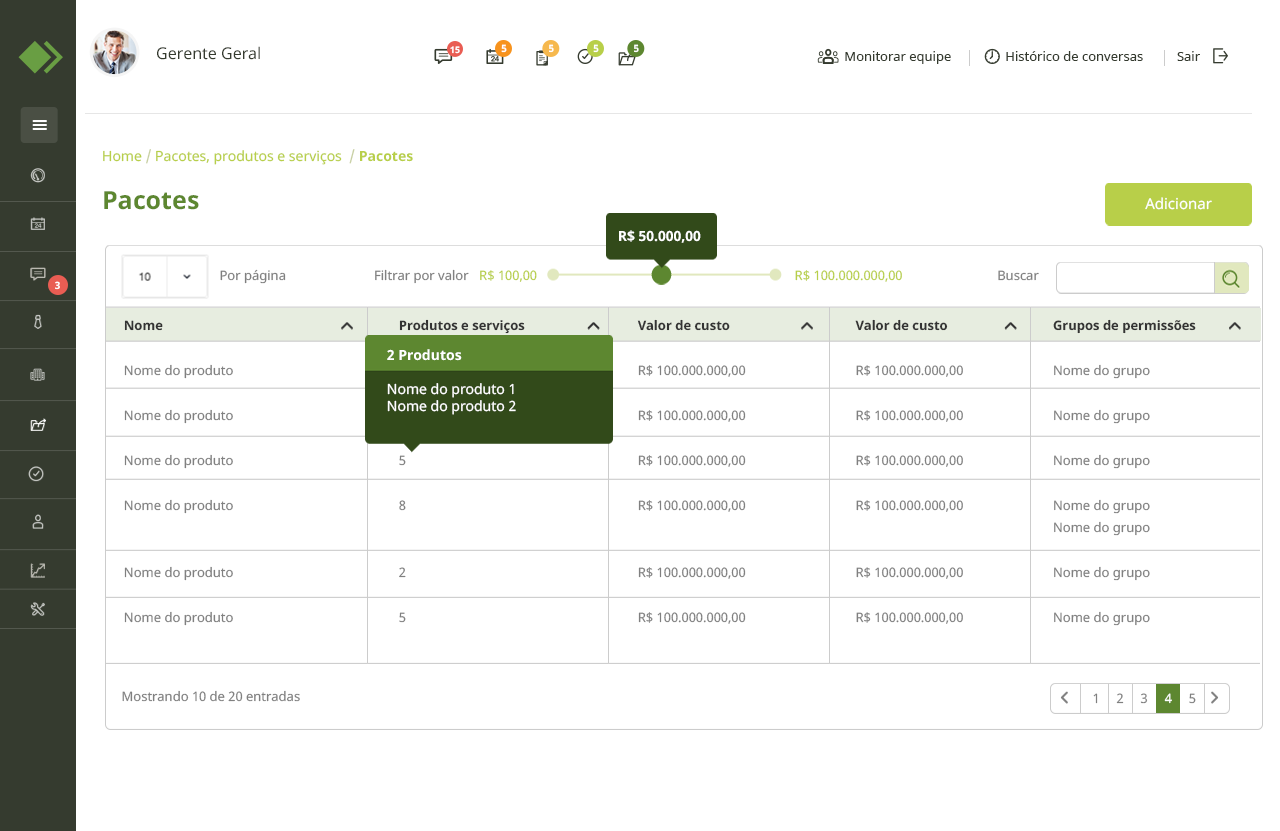
<style>
.page{position:relative;width:1280px;height:831px;background:#ffffff}
.page>*{position:absolute;margin:0}
.t1{font:16px "NotoSans";color:#353b2f}
.t2{font:9px "NotoSans-Bold";color:#ffffff}
.t3{font:10px "NotoSans-Bold";color:#ffffff}
.t4{font:13px "NotoSans";color:#353b2f}
.t5{font:14px "NotoSans";color:#b8cf49}
.t6{font:14px "NotoSans";color:#c7cfa1}
.t7{font:14px "NotoSans-Bold";color:#b8cf49}
.t8{font:25px "NotoSans-Bold";color:#5d8730}
.t9{font:15px "NotoSans";color:#ffffff}
.t10{font:14px "NotoSans-Bold";color:#ffffff}
.t11{font:13px "NotoSans";color:#808080}
.t12{font:13px "NotoSans";color:#b8cf49}
.t13{font:13px/45px "NotoSans";color:#808080}
.t14{font:13px/45px "NotoSans-Bold";color:#333333}
.t15{font:13px/22px "NotoSans";color:#808080}
.t16{font:14px "NotoSans";color:#ffffff}
</style>
<div class="page">
<p class="t1" style="left:157px;top:46px;width:103px;height:14px">Gerente Geral</p>
<p class="t2" style="left:450px;top:46px;width:10px;height:8px">15</p>
<p class="t3" style="left:501px;top:44px;width:6px;height:9px">5</p>
<p class="t3" style="left:549px;top:44px;width:5px;height:9px">5</p>
<p class="t3" style="left:593px;top:44px;width:6px;height:9px">5</p>
<p class="t3" style="left:634px;top:44px;width:5px;height:9px">5</p>
<p class="t4" style="left:845px;top:51px;width:355px;height:13px">Monitorar equipe                Histórico de conversas          Sair</p>
<p class="t5" style="left:103px;top:149px;width:310px;height:16px">Home <span class="t6">/</span> Pacotes, produtos e serviços  <span class="t6">/ </span><span class="t7">Pacotes</span></p>
<p class="t8" style="left:104px;top:191px;width:95px;height:19px">Pacotes</p>
<p class="t9" style="left:1145px;top:197px;width:67px;height:13px">Adicionar</p>
<p class="t10" style="left:619px;top:230px;width:82px;height:13px">R$ 50.000,00</p>
<p class="t11" style="left:220px;top:269px;width:66px;height:15px">Por página</p>
<p class="t11" style="left:375px;top:269px;width:94px;height:15px">Filtrar por valor</p>
<p class="t12" style="left:480px;top:270px;width:57px;height:12px">R$ 100,00</p>
<p class="t12" style="left:795px;top:270px;width:107px;height:12px">R$ 100.000.000,00</p>
<p class="t11" style="left:998px;top:270px;width:41px;height:11px">Buscar</p>
<p class="t3" style="left:55px;top:281px;width:5px;height:9px">3</p>
<p class="t13" style="left:124px;top:320px;width:109px;height:306px"><span class="t14">Nome<br></span>Nome do produto<br>Nome do produto<br>Nome do produto<br>Nome do produto<br><br>Nome do produto<br>Nome do produto<br>Nome do produto</p>
<p class="t13" style="left:637px;top:319px;width:109px;height:305px"><span class="t14">Valor de custo<br></span>R$ 100.000.000,00<br>R$ 100.000.000,00<br>R$ 100.000.000,00<br>R$ 100.000.000,00<br><br>R$ 100.000.000,00<br>R$ 100.000.000,00<br>R$ 100.000.000,00</p>
<p class="t13" style="left:855px;top:319px;width:108px;height:305px"><span class="t14">Valor de custo<br></span>R$ 100.000.000,00<br>R$ 100.000.000,00<br>R$ 100.000.000,00<br>R$ 100.000.000,00<br><br>R$ 100.000.000,00<br>R$ 100.000.000,00<br>R$ 100.000.000,00</p>
<p class="t13" style="left:1053px;top:319px;width:143px;height:307px"><span class="t14">Grupos de permissões<br></span>Nome do grupo<br>Nome do grupo<br>Nome do grupo<br>Nome do grupo<br><span class="t15">Nome do grupo<br></span>Nome do grupo<br>Nome do grupo<br>Nome do grupo</p>
<p class="t16" style="left:387px;top:349px;width:129px;height:66px"><span class="t10">2 Produtos<br><br></span>Nome do produto 1<br>Nome do produto 2</p>
<p class="t11" style="left:122px;top:690px;width:178px;height:12px">Mostrando 10 de 20 entradas</p>
</div>
